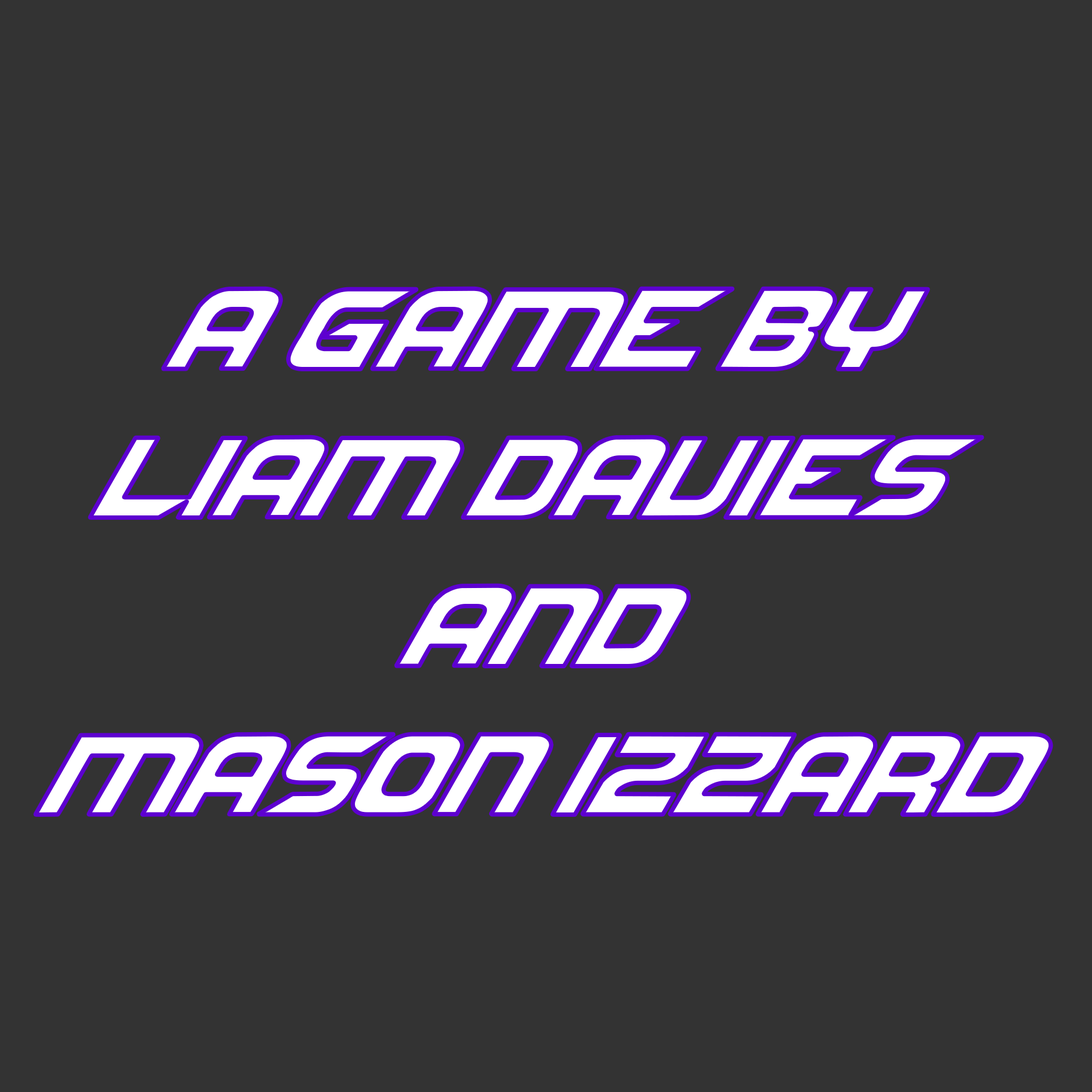
<style>
.page{position:relative;width:1092px;height:1092px;background:#333333}
.page>*{position:absolute;margin:0}
.t1{font:123.8px "NFSfont";color:#ffffff}
</style>
<div class="page">
<p class="t1" style="left:35px;top:288px;width:1016px;height:527px;text-align:center">A Game by<br>Liam Davies <br>AND<br>Mason Izzard</p>
</div>
